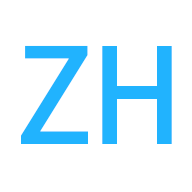
<style>
.page{position:relative;width:192px;height:192px;background:#ffffff}
.page>*{position:absolute;margin:0}
.t1{font:128px "AdobeHeitiStd-Regular";color:#21b3fe}
</style>
<div class="page">
<p class="t1" style="left:21px;top:45px;width:151px;height:99px">ZH</p>
</div>
